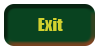
<style>
.page{position:relative;width:100px;height:50px;background:#094320}
.page>*{position:absolute;margin:0}
.t1{font:17.2px "Impact";color:#d0d22f}
</style>
<div class="page">
<p class="t1" style="left:38px;top:18px;width:25px;height:13px">Exit</p>
</div>
